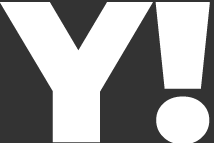
<style>
.page{position:relative;width:214px;height:143px;background:#ffffff}
.page>*{position:absolute;margin:0}
.t1{font:200px "Montserrat-Black";color:#ffffff}
</style>
<div class="page">
<p class="t1" style="left:0px;top:2px;width:210px;height:143px">Y!</p>
</div>
